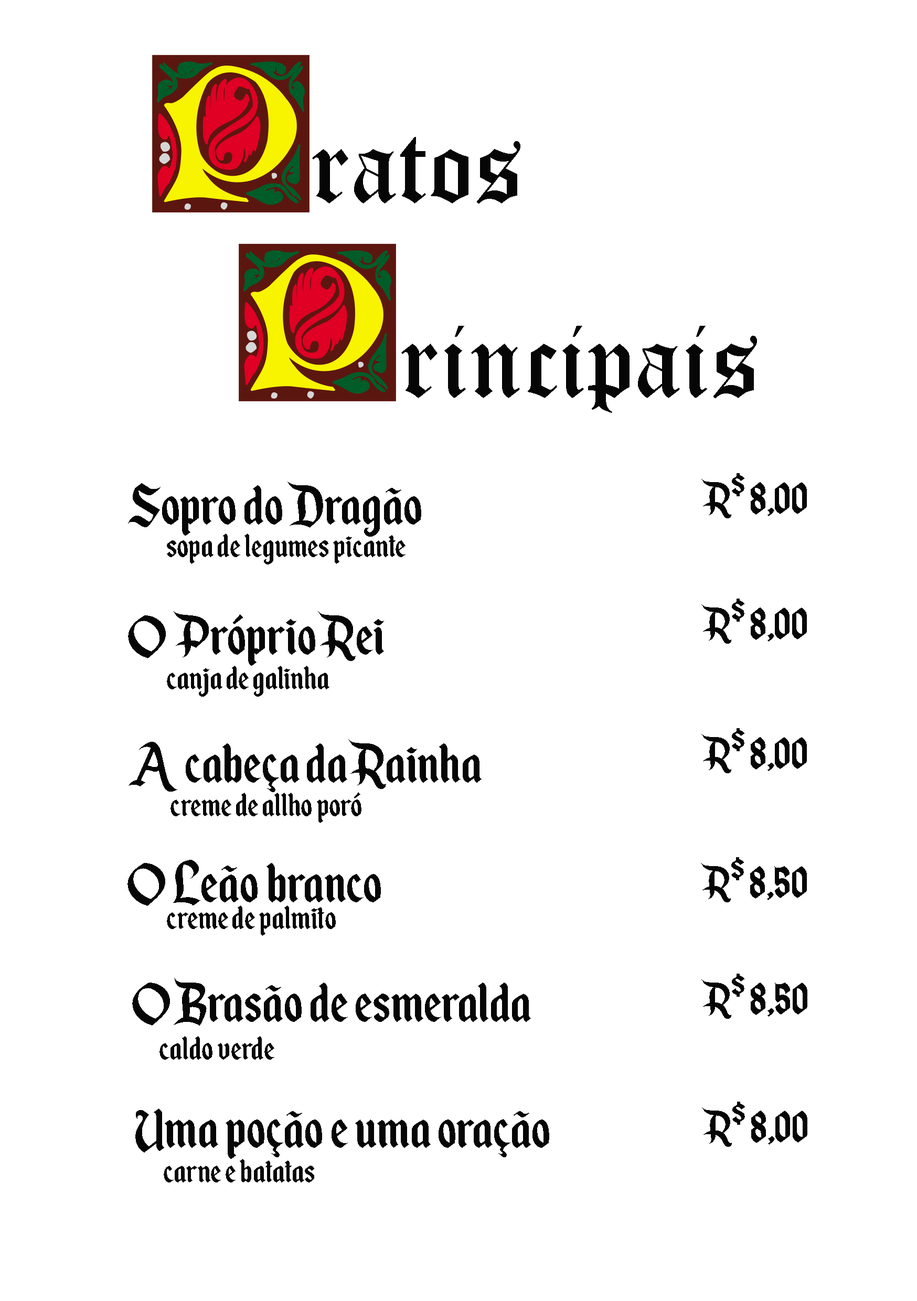
<style>
.page{position:relative;width:917px;height:1301px;background:#ffffff}
.page>*{position:absolute;margin:0}
.t1{font:104.9px "OldEnglishTextMT";color:#070606}
.t2{font:52.4px "EnchantedLand";color:#070606}
.t3{font:65.6px "EnchantedLand";color:#070606}
.t4{font:39.3px "EnchantedLand";color:#070606}
</style>
<div class="page">
<p class="t1" style="left:312px;top:137px;width:208px;height:66px">ratos</p>
<p class="t1" style="left:401px;top:326px;width:356px;height:87px">rincipais</p>
<p class="t2" style="left:701px;top:473px;width:106px;height:45px">R$ 8,00</p>
<p class="t3" style="left:128px;top:481px;width:293px;height:56px">Sopro do Dragão</p>
<p class="t4" style="left:167px;top:533px;width:238px;height:31px">sopa de legumes picante</p>
<p class="t2" style="left:701px;top:598px;width:106px;height:46px">R$ 8,00</p>
<p class="t3" style="left:128px;top:611px;width:256px;height:55px">O Próprio Rei</p>
<p class="t4" style="left:167px;top:666px;width:162px;height:30px">canja de galinha</p>
<p class="t2" style="left:701px;top:728px;width:106px;height:45px">R$ 8,00</p>
<p class="t3" style="left:128px;top:739px;width:353px;height:53px">A cabeça da Rainha</p>
<p class="t4" style="left:170px;top:792px;width:191px;height:31px">creme de allho poró</p>
<p class="t2" style="left:701px;top:857px;width:106px;height:45px">R$ 8,50</p>
<p class="t3" style="left:127px;top:860px;width:254px;height:46px">O Leão branco</p>
<p class="t4" style="left:167px;top:905px;width:169px;height:31px">creme de palmito</p>
<p class="t3" style="left:132px;top:978px;width:399px;height:47px">O Brasão de esmeralda</p>
<p class="t2" style="left:701px;top:973px;width:106px;height:46px">R$ 8,50</p>
<p class="t4" style="left:159px;top:1036px;width:115px;height:23px">caldo verde</p>
<p class="t3" style="left:135px;top:1108px;width:414px;height:51px">Uma poção e uma oração</p>
<p class="t2" style="left:702px;top:1101px;width:105px;height:45px">R$ 8,00</p>
<p class="t4" style="left:164px;top:1159px;width:150px;height:23px">carne e batatas</p>
</div>
